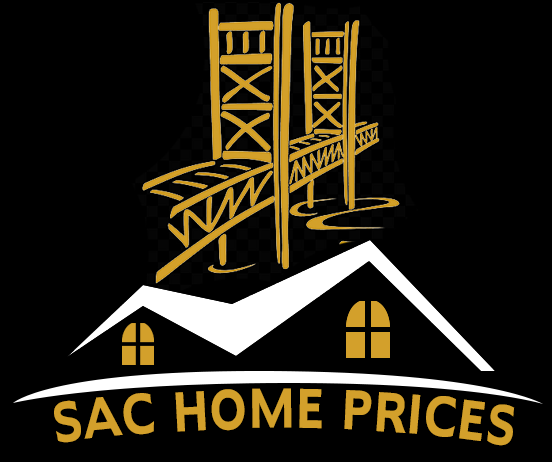
<style>
.page{position:relative;width:552px;height:462px;background:#000000}
.page>*{position:absolute;margin:0}
.t1{font:48px "Adams-Condensed-Bold";color:#d3a02b}
</style>
<div class="page">
<p class="t1" style="left:54px;top:388px;width:461px;height:58px">SAC HOME PRICES</p>
</div>
